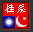
<style>
.page{position:relative;width:33px;height:32px;background:#333333}
.page>*{position:absolute;margin:0}
.t1{font:10.4px "SimSun";color:#ffffff}
</style>
<div class="page">
<p class="t1" style="left:5px;top:4px;width:20px;height:9px">桂系</p>
</div>
